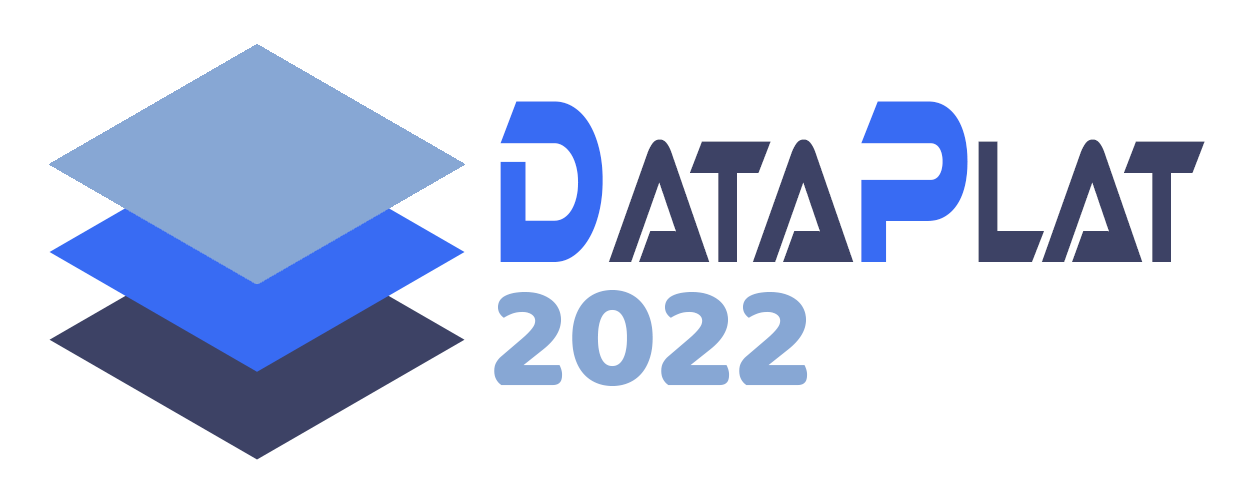
<style>
.page{position:relative;width:1249px;height:501px;background:#ffffff}
.page>*{position:absolute;margin:0}
.t1{font:180px "EthnocentricRg-Regular";color:#3d4265;scale:0.5 1}
.t2{font:240px "EthnocentricRg-Regular";color:#386bf3;scale:0.5 1}
.t3{font:150px "BalooThambi-Regular";color:#87a7d4}
</style>
<div class="page">
<p class="t1" style="left:500px;top:101px;width:705px;height:161px"><span class="t2">D</span>ata<span class="t2">P</span>lat</p>
<p class="t3" style="left:494px;top:290px;width:314px;height:96px">2022</p>
</div>
